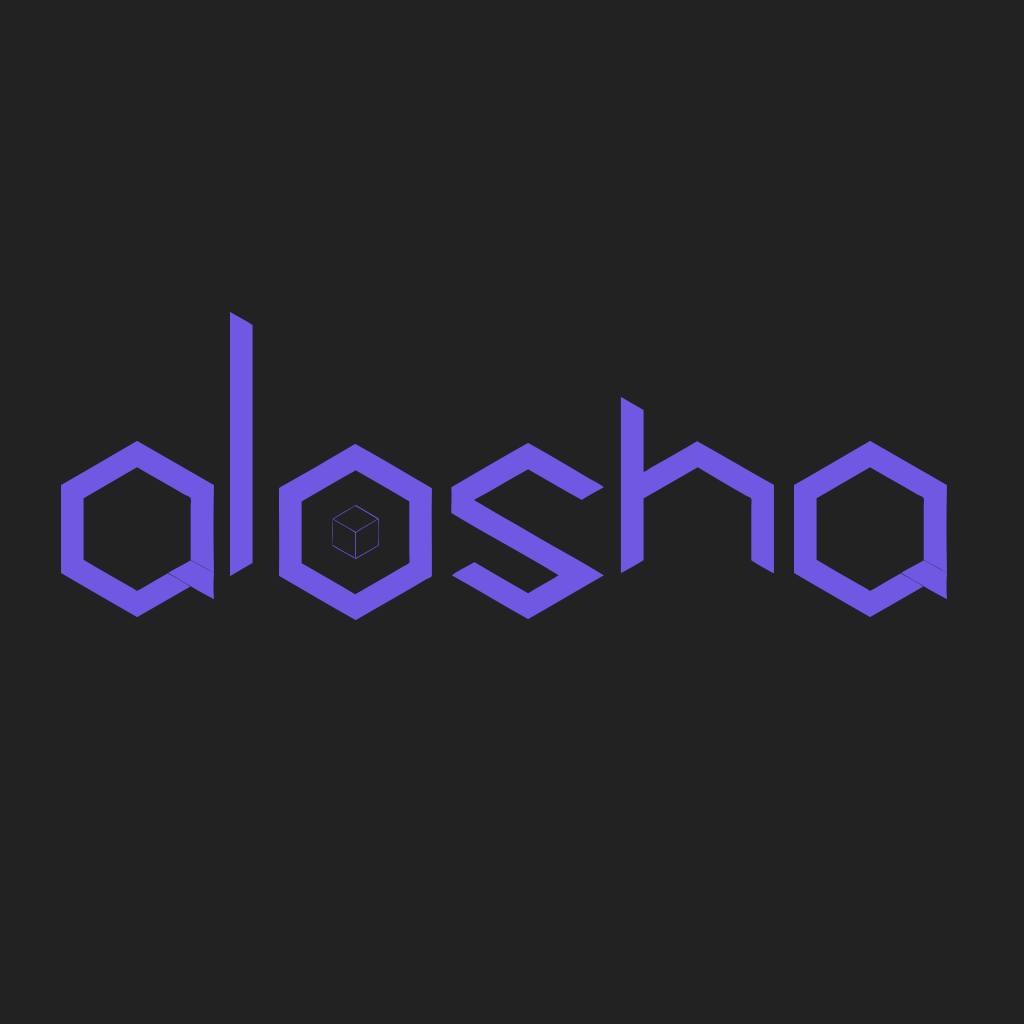
<style>
.page{position:relative;width:1024px;height:1024px;background:#222222}
.page>*{position:absolute;margin:0}
.t1{font:208.3px "Cubic";letter-spacing:0.01em;color:#7158e2}
</style>
<div class="page">
<p class="t1" style="left:61px;top:312px;width:886px;height:308px">ALOSHA</p>
</div>
